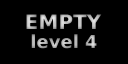
<style>
.page{position:relative;width:128px;height:64px;background:#000000}
.page>*{position:absolute;margin:0}
.t1{font:20px "BitstreamVeraSans-Bold";color:#c1c1c1}
.t2{font:18px "BitstreamVeraSans-Bold";color:#b4b4b4}
</style>
<div class="page">
<p class="t1" style="left:26px;top:14px;width:76px;height:15px">EMPTY</p>
<p class="t2" style="left:31px;top:34px;width:66px;height:15px">level 4</p>
</div>
